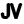
<style>
.page{position:relative;width:24px;height:24px;background:#ffffff}
.page>*{position:absolute;margin:0}
.t1{font:18.9px "Helvetica-Light";color:#000000;scale:0.95 1}
</style>
<div class="page">
<p class="t1" style="left:1px;top:4px;width:21px;height:14px">JV</p>
</div>
